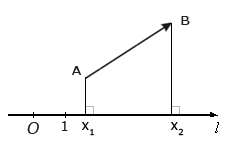
<style>
.page{position:relative;width:227px;height:151px;background:#ffffff}
.page>*{position:absolute;margin:0}
.t1{font:13.3px "Verdana";color:#1f1f1f;scale:1.03 1}
.t2{font:16.5px "Verdana";color:#1f1f1f;font-style:italic}
.t3{font:13.7px "Verdana";color:#1f1f1f}
</style>
<div class="page">
<p class="t1" style="left:181px;top:16px;width:9px;height:9px">B</p>
<p class="t1" style="left:72px;top:66px;width:10px;height:9px">A</p>
<p class="t2" style="left:27px;top:122px;width:12px;height:12px">O</p>
<p class="t3" style="left:62px;top:121px;width:6px;height:10px">1</p>
</div>
